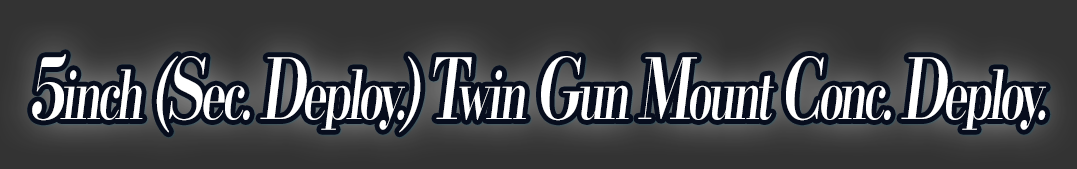
<style>
.page{position:relative;width:1077px;height:169px;background:#333333}
.page>*{position:absolute;margin:0}
.t1{font:67.2px "KochoStd-Heavy";letter-spacing:-0.08em;color:#ffffff;font-style:italic;scale:0.68 1}
.t2{font:84px "KochoStd-Heavy";letter-spacing:-0.08em;color:#ffffff;font-style:italic;scale:0.68 1}
</style>
<div class="page">
<p class="t1" style="left:32px;top:54px;width:1014px;height:79px"><span class="t2">5</span>inch <span class="t2">(S</span>ec. <span class="t2">D</span>eploy.<span class="t2">) T</span>win <span class="t2">G</span>un <span class="t2">M</span>ount <span class="t2">C</span>onc. <span class="t2">D</span>eploy.</p>
</div>
